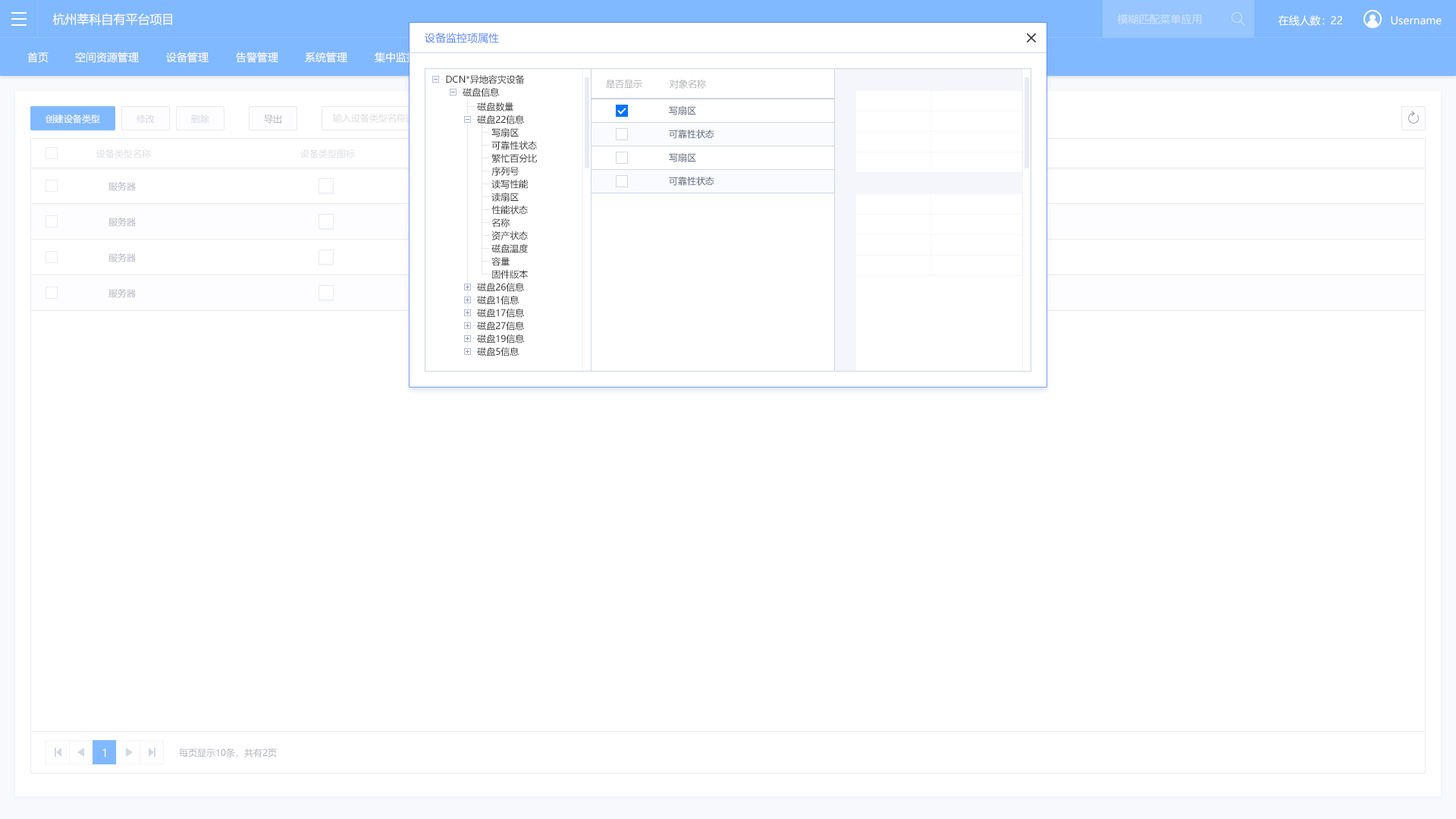
<style>
.page{position:relative;width:1456px;height:819px;background:#ffffff}
.page>*{position:absolute;margin:0}
.t1{font:12.1px "MicrosoftYaHei";color:#ffffff}
.t2{font:10.6px "MicrosoftYaHei";color:#cee4ff}
.t3{font:10.6px "MicrosoftYaHei";color:#ffffff}
.t4{font:10.6px "MicrosoftYaHei";color:#5184ff}
.t5{font:9.1px "MicrosoftYaHei";color:#333333}
.t6{font:9.1px "MicrosoftYaHei";color:#adaeb0}
.t7{font:9.1px "MicrosoftYaHei";color:#ffffff}
.t8{font:9.1px "MicrosoftYaHei"}
.t9{font:9.1px "MicrosoftYaHei";color:#596477}
.t10{font:9.1px "MicrosoftYaHei";color:#d6d9e3}
.t11{font:9.1px "MicrosoftYaHei";color:#b3b3b3}
.t12{font:9.1px "MicrosoftYaHei";color:#dcdde1}
.t13{font:9.1px "MicrosoftYaHei";color:#acb2bb}
.t14{font:10.6px "MicrosoftYaHei";color:#fefeff}
</style>
<div class="page">
<p class="t1" style="left:52px;top:13px;width:120px;height:13px">杭州莘科自有平台项目</p>
<p class="t2" style="left:1117px;top:14px;width:85px;height:11px">模糊匹配菜单应用</p>
<p class="t3" style="left:1278px;top:15px;width:46px;height:11px">在线人数：</p>
<p class="t3" style="left:1331px;top:16px;width:11px;height:8px">22</p>
<p class="t3" style="left:1391px;top:16px;width:51px;height:9px">Username</p>
<p class="t4" style="left:425px;top:33px;width:74px;height:10px">设备监控项属性</p>
<p class="t3" style="left:27px;top:52px;width:22px;height:11px">首页</p>
<p class="t3" style="left:75px;top:52px;width:64px;height:11px">空间资源管理</p>
<p class="t3" style="left:166px;top:52px;width:43px;height:11px">设备管理</p>
<p class="t3" style="left:236px;top:52px;width:42px;height:11px">告警管理</p>
<p class="t3" style="left:305px;top:52px;width:42px;height:11px">系统管理</p>
<p class="t3" style="left:375px;top:52px;width:85px;height:11px">集中监控展示管理</p>
<p class="t5" style="left:446px;top:74px;width:79px;height:10px">DCN*异地容灾设备</p>
<p class="t5" style="left:463px;top:88px;width:37px;height:9px">磁盘信息</p>
<p class="t6" style="left:606px;top:80px;width:36px;height:9px">是否显示</p>
<p class="t6" style="left:670px;top:80px;width:36px;height:9px">对象名称</p>
<p class="t7" style="left:45px;top:114px;width:55px;height:10px">创建设备类型</p>
<p class="t8" style="left:333px;top:113px;width:109px;height:10px">输入设备类型名称进行搜索</p>
<p class="t5" style="left:477px;top:102px;width:36px;height:9px">磁盘数量</p>
<p class="t9" style="left:669px;top:106px;width:27px;height:9px">写扇区</p>
<p class="t10" style="left:136px;top:115px;width:19px;height:9px">修改</p>
<p class="t8" style="left:191px;top:115px;width:18px;height:9px">删除</p>
<p class="t11" style="left:264px;top:115px;width:17px;height:9px">导出</p>
<p class="t5" style="left:477px;top:115px;width:48px;height:9px">磁盘22信息</p>
<p class="t5" style="left:491px;top:128px;width:28px;height:9px">写扇区</p>
<p class="t9" style="left:669px;top:130px;width:45px;height:9px">可靠性状态</p>
<p class="t12" style="left:96px;top:149px;width:55px;height:9px">设备类型名称</p>
<p class="t12" style="left:300px;top:149px;width:55px;height:9px">设备类型图标</p>
<p class="t5" style="left:491px;top:141px;width:46px;height:9px">可靠性状态</p>
<p class="t5" style="left:491px;top:153px;width:46px;height:10px">繁忙百分比</p>
<p class="t9" style="left:669px;top:153px;width:27px;height:9px">写扇区</p>
<p class="t5" style="left:491px;top:167px;width:28px;height:9px">序列号</p>
<p class="t13" style="left:108px;top:181px;width:28px;height:10px">服务器</p>
<p class="t5" style="left:491px;top:179px;width:37px;height:10px">读写性能</p>
<p class="t9" style="left:669px;top:177px;width:45px;height:9px">可靠性状态</p>
<p class="t5" style="left:491px;top:193px;width:28px;height:9px">读扇区</p>
<p class="t5" style="left:491px;top:205px;width:37px;height:10px">性能状态</p>
<p class="t13" style="left:108px;top:217px;width:28px;height:10px">服务器</p>
<p class="t5" style="left:491px;top:218px;width:19px;height:9px">名称</p>
<p class="t5" style="left:491px;top:231px;width:37px;height:9px">资产状态</p>
<p class="t5" style="left:491px;top:243px;width:37px;height:10px">磁盘温度</p>
<p class="t13" style="left:108px;top:253px;width:28px;height:9px">服务器</p>
<p class="t5" style="left:491px;top:257px;width:19px;height:9px">容量</p>
<p class="t5" style="left:492px;top:270px;width:36px;height:9px">固件版本</p>
<p class="t13" style="left:108px;top:288px;width:28px;height:10px">服务器</p>
<p class="t5" style="left:477px;top:283px;width:48px;height:9px">磁盘26信息</p>
<p class="t5" style="left:477px;top:296px;width:42px;height:9px">磁盘1信息</p>
<p class="t5" style="left:477px;top:309px;width:48px;height:9px">磁盘17信息</p>
<p class="t5" style="left:477px;top:322px;width:48px;height:9px">磁盘27信息</p>
<p class="t5" style="left:477px;top:334px;width:48px;height:10px">磁盘19信息</p>
<p class="t5" style="left:477px;top:347px;width:42px;height:9px">磁盘5信息</p>
<p class="t14" style="left:102px;top:748px;width:4px;height:9px">1</p>
<p class="t13" style="left:179px;top:748px;width:98px;height:10px">每页显示10条，共有2页</p>
</div>
